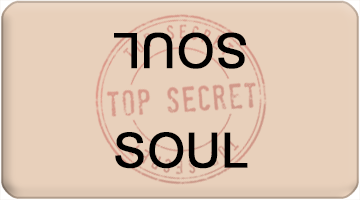
<style>
.page{position:relative;width:360px;height:200px;background:#e8d0bb}
.page>*{position:absolute;margin:0}
.t1{font:48px "ArialMT";color:#000000;font-weight:bold}
</style>
<div class="page">
<p class="t1" style="left:114px;top:32px;width:132px;height:37px;rotate:180deg">SOUL</p>
<p class="t1" style="left:115px;top:132px;width:133px;height:37px">SOUL</p>
</div>
